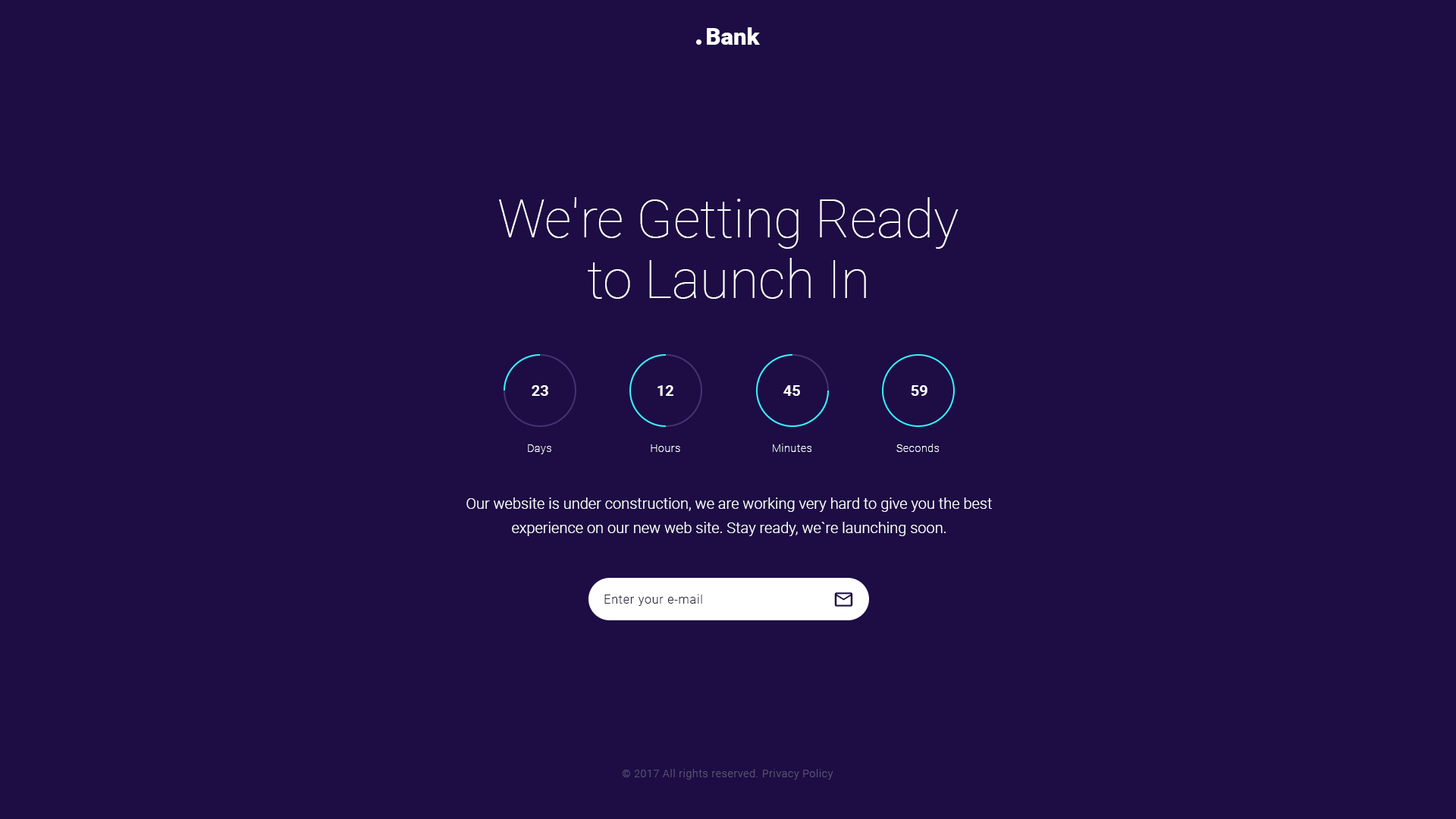
<style>
.page{position:relative;width:1456px;height:819px;background:#1d0d44}
.page>*{position:absolute;margin:0}
.t1{font:22.7px "Roboto-Black";color:#ffffff;scale:1.04 1}
.t2{font:53.1px/60.7px "Roboto-Thin";color:#ffffff}
.t3{font:15.2px "Roboto-Bold";color:#ffffff}
.t4{font:10.6px "Roboto-Thin";letter-spacing:0.05em;color:#ffffff}
.t5{font:15.2px/24.3px "Roboto-Light";color:#ffffff}
.t6{font:12.1px "Roboto-Light";letter-spacing:0.05em;color:#29293a}
.t7{font:10.6px "Roboto-Light";letter-spacing:0.05em;color:#585471}
</style>
<div class="page">
<p class="t1" style="left:707px;top:27px;width:53px;height:18px">Bank</p>
<p class="t2" style="left:499px;top:197px;width:460px;height:102px;text-align:center">We're Getting Ready<br>to Launch In</p>
<p class="t3" style="left:532px;top:385px;width:16px;height:11px">23</p>
<p class="t3" style="left:657px;top:385px;width:16px;height:11px">12</p>
<p class="t3" style="left:783px;top:385px;width:17px;height:11px">45</p>
<p class="t3" style="left:911px;top:385px;width:16px;height:11px">59</p>
<p class="t4" style="left:528px;top:444px;width:23px;height:10px">Days</p>
<p class="t4" style="left:651px;top:444px;width:29px;height:8px">Hours</p>
<p class="t4" style="left:773px;top:444px;width:38px;height:8px">Minutes</p>
<p class="t4" style="left:896px;top:444px;width:43px;height:8px">Seconds</p>
<p class="t5" style="left:466px;top:497px;width:526px;height:39px;text-align:center">Our website is under construction, we are working very hard to give you the best experience on our new web site. Stay ready, we`re launching soon.</p>
<p class="t6" style="left:604px;top:595px;width:98px;height:11px">Enter your e-mail</p>
<p class="t7" style="left:622px;top:769px;width:211px;height:11px">© 2017 All rights reserved. Privacy Policy</p>
</div>
